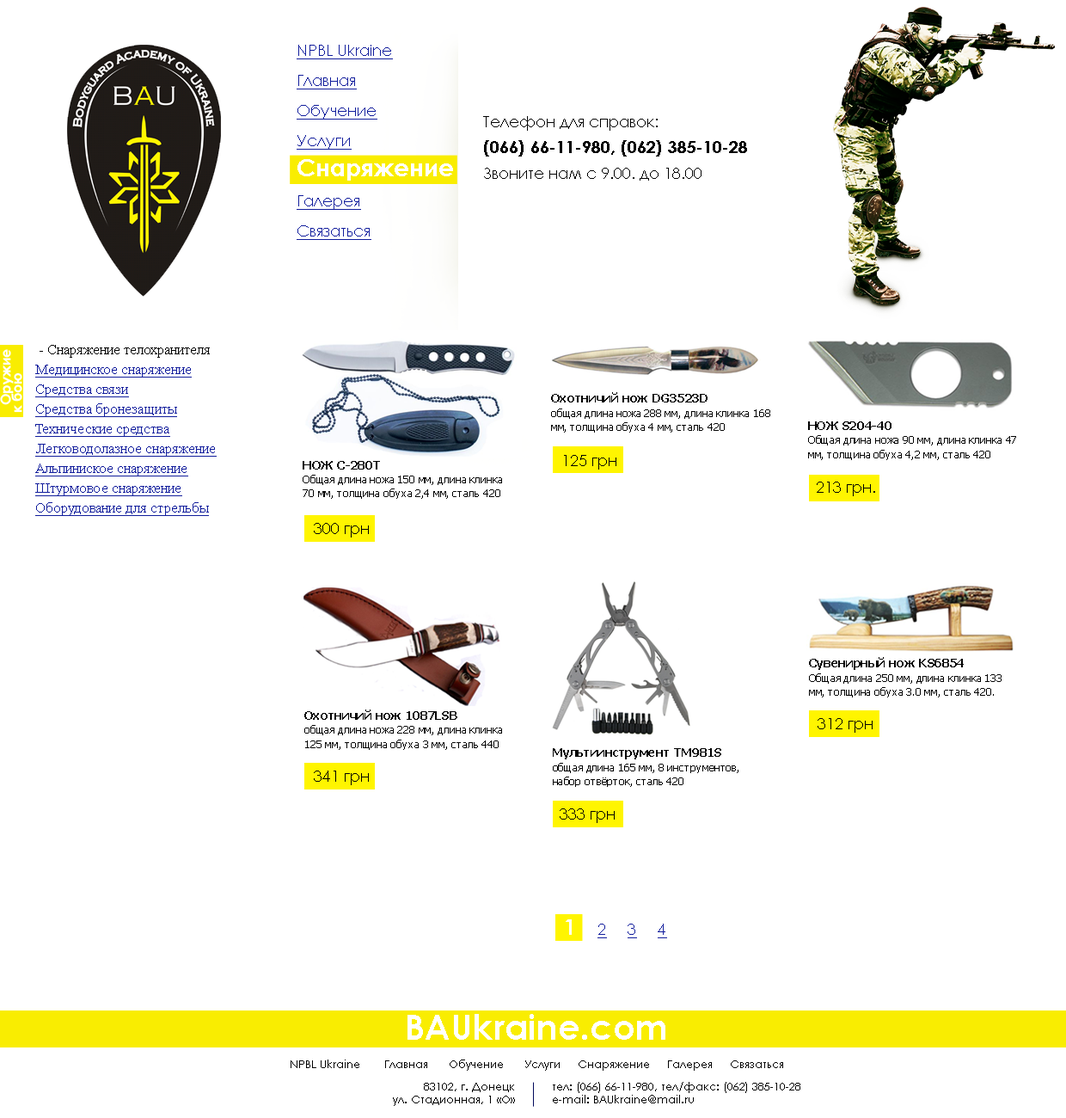
<style>
.page{position:relative;width:1066px;height:1118px;background:#ffffff}
.page>*{position:absolute;margin:0}
.t1{font:15.5px/30.1px "CenturyGothic";color:#111d9c;text-decoration:underline}
.t2{font:24.1px/30.1px "CenturyGothic-Bold";color:#ffffff}
.t3{font:17.2px/25.8px "CenturyGothic-Bold";color:#000000}
.t4{font:15.5px/25.8px "CenturyGothic";color:#000000}
.t5{font:13.8px/11.2px "CenturyGothic-Bold";color:#ffffff}
.t6{font:14.6px/19.8px "TimesNewRomanPSMT";color:#111d9c;text-decoration:underline}
.t7{font:14.6px/19.8px "TimesNewRomanPSMT";color:#000000}
.t8{font:10.3px/14.2px "Tahoma";color:#000000}
.t9{font:12px/14.2px "Tahoma-Bold";color:#000000}
.t10{font:15.5px "CenturyGothic";color:#000000}
.t11{font:15.5px "CenturyGothic";color:#111d9c;text-decoration:underline}
.t12{font:21.5px "CenturyGothic-Bold";color:#ffffff}
.t13{font:35.3px "CenturyGothic-Bold";color:#ffffff}
.t14{font:11.2px "CenturyGothic";color:#000000}
</style>
<div class="page">
<p class="t1" style="left:297px;top:45px;width:156px;height:195px">NPBL Ukraine<br>Главная<br>Обучение<br>Услуги<br><span class="t2">Снаряжение<br></span>Галерея<br>Связаться</p>
<p class="t3" style="left:483px;top:116px;width:264px;height:65px"><span class="t4">Телефон для справок: <br></span>(066) 66-11-980, (062) 385-10-28 <br><span class="t4">Звоните нам с 9.00. до 18.00</span></p>
<p class="t5" style="left:0px;top:349px;width:22px;height:64px;rotate:-90deg">Оружие<br>к бою</p>
<p class="t6" style="left:35px;top:345px;width:182px;height:171px"><span class="t7"> - Снаряжение телохранителя<br></span>Медицинское снаряжение<br>Средства связи<br>Средства бронезащиты<br>Технические средства<br>Легководолазное снаряжение<br>Альпиниское снаряжение<br>Штурмовое снаряжение<br>Оборудование для стрельбы</p>
<p class="t8" style="left:551px;top:392px;width:220px;height:41px"><span class="t9">Охотничий нож DG3523D<br></span>общая длина ножа 288 мм, длина клинка 168 мм, толщина обуха 4 мм, сталь 420</p>
<p class="t8" style="left:808px;top:421px;width:209px;height:39px"><span class="t9">НОЖ S204-40<br></span>Общая длина ножа 90 мм, длина клинка 47 мм, толщина обуха 4,2 мм, сталь 420</p>
<p class="t8" style="left:303px;top:461px;width:199px;height:38px"><span class="t9">НОЖ C-280T<br></span>Общая длина ножа 150 мм, длина клинка 70 мм, толщина обуха 2,4 мм, сталь 420</p>
<p class="t10" style="left:564px;top:455px;width:53px;height:15px">125 грн</p>
<p class="t10" style="left:817px;top:482px;width:59px;height:14px">213 грн.</p>
<p class="t10" style="left:314px;top:523px;width:55px;height:15px">300 грн</p>
<p class="t8" style="left:809px;top:657px;width:193px;height:41px"><span class="t9">Сувенирный нож KS6854<br></span>Общая длина 250 мм, длина клинка 133 мм, толщина обуха 3.0 мм, сталь 420.</p>
<p class="t8" style="left:304px;top:710px;width:198px;height:40px"><span class="t9">Охотничий нож 1087LSB<br></span>общая длина ножа 228 мм, длина клинка 125 мм, толщина обуха 3 мм, сталь 440</p>
<p class="t10" style="left:818px;top:718px;width:55px;height:15px">312 грн</p>
<p class="t8" style="left:553px;top:748px;width:186px;height:39px"><span class="t9">Мультиинструмент TM981S<br></span>общая длина 165 мм, 8 инструментов, набор отвёрток, сталь 420</p>
<p class="t10" style="left:314px;top:771px;width:55px;height:14px">341 грн</p>
<p class="t10" style="left:560px;top:808px;width:55px;height:15px">333 грн</p>
<p class="t11" style="left:566px;top:919px;width:101px;height:19px"><span class="t12">1     </span>2     3     4</p>
<p class="t13" style="left:408px;top:1014px;width:258px;height:26px">BAUkraine.com</p>
<p class="t14" style="left:291px;top:1060px;width:493px;height:11px">NPBL Ukraine       Главная      Обучение      Услуги     Снаряжение     Галерея     Связаться</p>
<p class="t14" style="left:393px;top:1083px;width:122px;height:23px;text-align:right">83102, г. Донецк<br>ул. Стадионная, 1 «О»</p>
<p class="t14" style="left:553px;top:1082px;width:248px;height:21px">тел: (066) 66-11-980, тел/факс: (062) 385-10-28<br>e-mail: BAUkraine@mail.ru</p>
</div>
